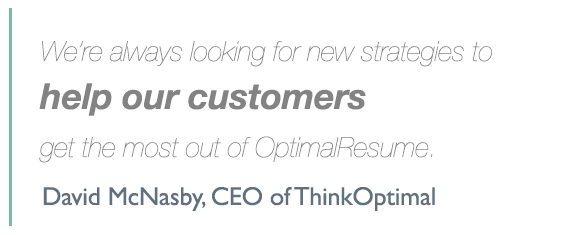
<style>
.page{position:relative;width:569px;height:244px;background:#ffffff}
.page>*{position:absolute;margin:0}
.t1{font:28px/48px "HelveticaNeue-UltraLightItalic";letter-spacing:-0.01em;color:#838383}
.t2{font:36px/48px "HelveticaNeue-BoldItalic";letter-spacing:-0.01em;color:#838383}
.t3{font:26px "GillSans";letter-spacing:-0.01em;color:#60707f}
</style>
<div class="page">
<p class="t1" style="left:39px;top:41px;width:453px;height:122px">We’re always looking for new strategies to<br><span class="t2">help our customers<br></span>get the most out of OptimalResume.</p>
<p class="t3" style="left:43px;top:187px;width:392px;height:24px">David McNasby, CEO of ThinkOptimal</p>
</div>
